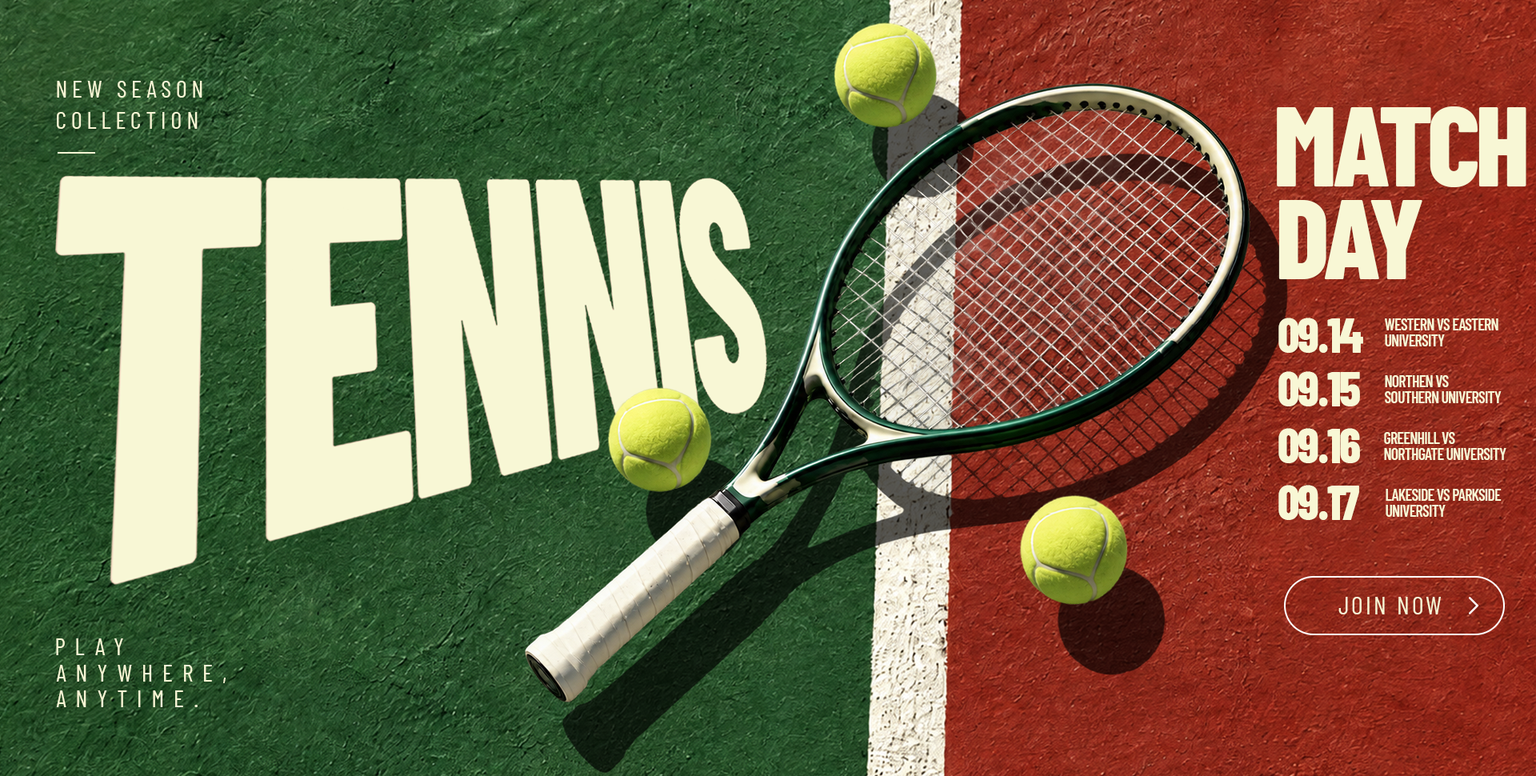
<style>
.page{position:relative;width:1536px;height:776px}
.page>*{position:absolute;margin:0}
.t1{font:24px "BarlowCondensed-Regular";letter-spacing:0.2em;color:#f8f7d5}
.t2{font:112.8px "BarlowCondensed-ExtraBold";letter-spacing:-0.04em;color:#f8f7d5}
.t3{font:48px "BarlowCondensed-ExtraBold";letter-spacing:-0.04em;color:#f8f7d5}
.t4{font:16px/16px "BarlowCondensed-SemiBold";letter-spacing:-0.04em;color:#f8f7d5}
.t5{font:25.6px "BarlowCondensed-Regular";letter-spacing:0.1em;color:#f8f7d5}
.t6{font:24px "BarlowCondensed-Regular";letter-spacing:0.4em;color:#f8f7d5}
</style>
<div class="page">
<p class="t1" style="left:57px;top:81px;width:145px;height:17px">NEW SEASON</p>
<p class="t1" style="left:57px;top:112px;width:141px;height:17px">COLLECTION</p>
<p class="t2" style="left:1277px;top:106px;width:250px;height:81px">MATCH</p>
<p class="t2" style="left:1279px;top:200px;width:144px;height:79px">DAY</p>
<p class="t3" style="left:1279px;top:318px;width:84px;height:35px">09.14</p>
<p class="t4" style="left:1385px;top:318px;width:114px;height:28px">WESTERN VS EASTERN<br>UNIVERSITY</p>
<p class="t3" style="left:1279px;top:371px;width:81px;height:35px">09.15</p>
<p class="t4" style="left:1385px;top:375px;width:117px;height:28px">NORTHEN VS <br>SOUTHERN UNIVERSITY</p>
<p class="t3" style="left:1279px;top:428px;width:81px;height:35px">09.16</p>
<p class="t4" style="left:1384px;top:432px;width:123px;height:28px">GREENHILL VS <br>NORTHGATE UNIVERSITY</p>
<p class="t3" style="left:1279px;top:485px;width:80px;height:35px">09.17</p>
<p class="t4" style="left:1386px;top:489px;width:116px;height:28px">LAKESIDE VS PARKSIDE <br>UNIVERSITY</p>
<p class="t5" style="left:1339px;top:597px;width:102px;height:18px">JOIN NOW</p>
<p class="t6" style="left:56px;top:639px;width:67px;height:16px">PLAY</p>
<p class="t6" style="left:56px;top:665px;width:170px;height:18px">ANYWHERE,</p>
<p class="t6" style="left:56px;top:691px;width:142px;height:16px">ANYTIME.</p>
</div>
